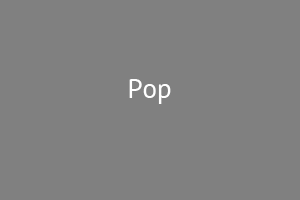
<style>
.page{position:relative;width:300px;height:200px;background:#808080}
.page>*{position:absolute;margin:0}
.t1{font:26.8px "PTSans-Regular";color:#ffffff}
</style>
<div class="page">
<p class="t1" style="left:129px;top:79px;width:42px;height:25px">Pop</p>
</div>
